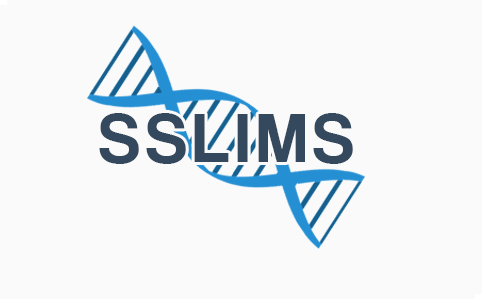
<style>
.page{position:relative;width:482px;height:299px;background:#fafafb}
.page>*{position:absolute;margin:0}
.t1{font:72px "CoolveticaRg-Regular";letter-spacing:0.1em;color:#34495e}
</style>
<div class="page">
<p class="t1" style="left:99px;top:113px;width:254px;height:51px">SSLIMS</p>
</div>
